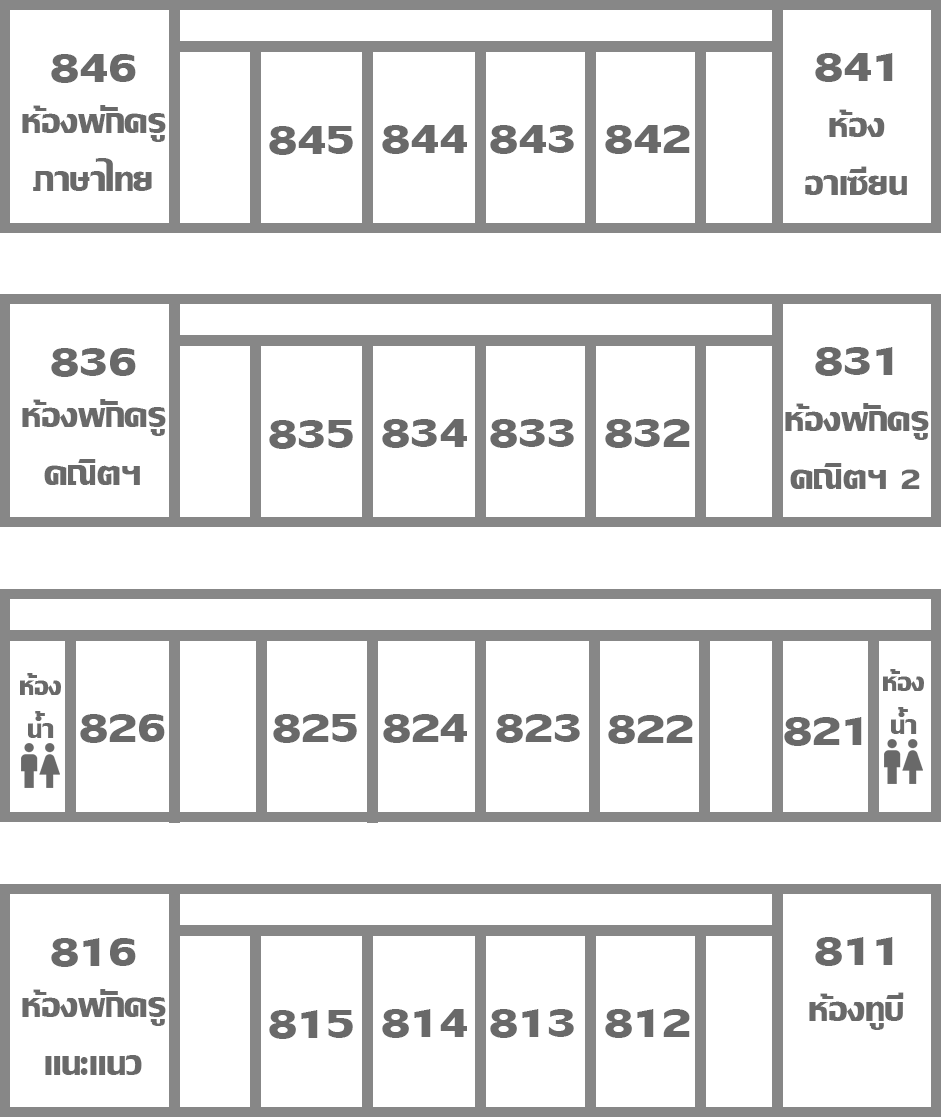
<style>
.page{position:relative;width:941px;height:1117px;background:#ffffff}
.page>*{position:absolute;margin:0}
.t1{font:60px "LilyUPCBold";color:#696969}
.t2{font:48px "LilyUPCBold";color:#696969}
</style>
<div class="page">
<p class="t1" style="left:51px;top:54px;width:85px;height:29px">846</p>
<p class="t1" style="left:815px;top:53px;width:78px;height:29px">841</p>
<p class="t2" style="left:22px;top:105px;width:144px;height:86px;text-align:center">ห้องพักครู<br>ภาษาไทย</p>
<p class="t2" style="left:805px;top:109px;width:102px;height:86px;text-align:center">ห้อง<br>อาเซียน</p>
<p class="t1" style="left:269px;top:126px;width:84px;height:29px">845</p>
<p class="t1" style="left:382px;top:125px;width:85px;height:29px">844</p>
<p class="t1" style="left:490px;top:125px;width:84px;height:29px">843</p>
<p class="t1" style="left:605px;top:125px;width:85px;height:29px">842</p>
<p class="t1" style="left:51px;top:348px;width:85px;height:29px">836</p>
<p class="t1" style="left:815px;top:347px;width:78px;height:29px">831</p>
<p class="t2" style="left:22px;top:399px;width:144px;height:86px;text-align:center">ห้องพักครู<br>คณิตฯ</p>
<p class="t2" style="left:785px;top:403px;width:144px;height:86px;text-align:center">ห้องพักครู<br>คณิตฯ 2</p>
<p class="t1" style="left:269px;top:420px;width:84px;height:29px">835</p>
<p class="t1" style="left:382px;top:419px;width:85px;height:29px">834</p>
<p class="t1" style="left:490px;top:419px;width:84px;height:29px">833</p>
<p class="t1" style="left:605px;top:419px;width:85px;height:29px">832</p>
<p class="t1" style="left:80px;top:714px;width:85px;height:29px">826</p>
<p class="t1" style="left:273px;top:714px;width:84px;height:29px">825</p>
<p class="t1" style="left:383px;top:714px;width:84px;height:29px">824</p>
<p class="t1" style="left:496px;top:714px;width:84px;height:29px">823</p>
<p class="t1" style="left:608px;top:715px;width:85px;height:29px">822</p>
<p class="t1" style="left:784px;top:717px;width:78px;height:29px">821</p>
<p class="t1" style="left:51px;top:938px;width:85px;height:29px">816</p>
<p class="t1" style="left:815px;top:937px;width:78px;height:29px">811</p>
<p class="t2" style="left:22px;top:989px;width:144px;height:86px;text-align:center">ห้องพักครู<br>แนะแนว</p>
<p class="t2" style="left:809px;top:992px;width:95px;height:38px">ห้องทูบี</p>
<p class="t1" style="left:269px;top:1010px;width:84px;height:29px">815</p>
<p class="t1" style="left:382px;top:1009px;width:85px;height:29px">814</p>
<p class="t1" style="left:490px;top:1009px;width:84px;height:29px">813</p>
<p class="t1" style="left:605px;top:1009px;width:85px;height:29px">812</p>
</div>
